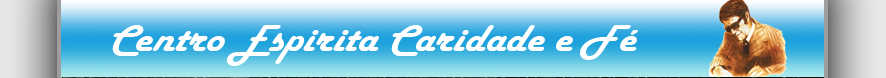
<style>
.page{position:relative;width:886px;height:78px}
.page>*{position:absolute;margin:0}
.t1{font:39px "HarlowSolid";color:#ffffff;font-style:italic;scale:1.12 1}
</style>
<div class="page">
<p class="t1" style="left:112px;top:25px;width:526px;height:41px">Centro Espirita Caridade e Fé</p>
</div>
